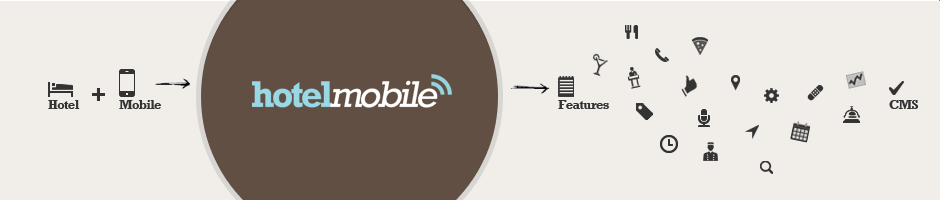
<style>
.page{position:relative;width:940px;height:200px;background:#f1eeea}
.page>*{position:absolute;margin:0}
.t1{font:13px "Rockwell-Bold";letter-spacing:-0.05em;color:#333333}
</style>
<div class="page">
<p class="t1" style="left:48px;top:100px;width:32px;height:9px">Hotel</p>
<p class="t1" style="left:119px;top:100px;width:42px;height:9px">Mobile</p>
<p class="t1" style="left:558px;top:100px;width:51px;height:9px">Features</p>
<p class="t1" style="left:889px;top:100px;width:30px;height:9px">CMS</p>
</div>
